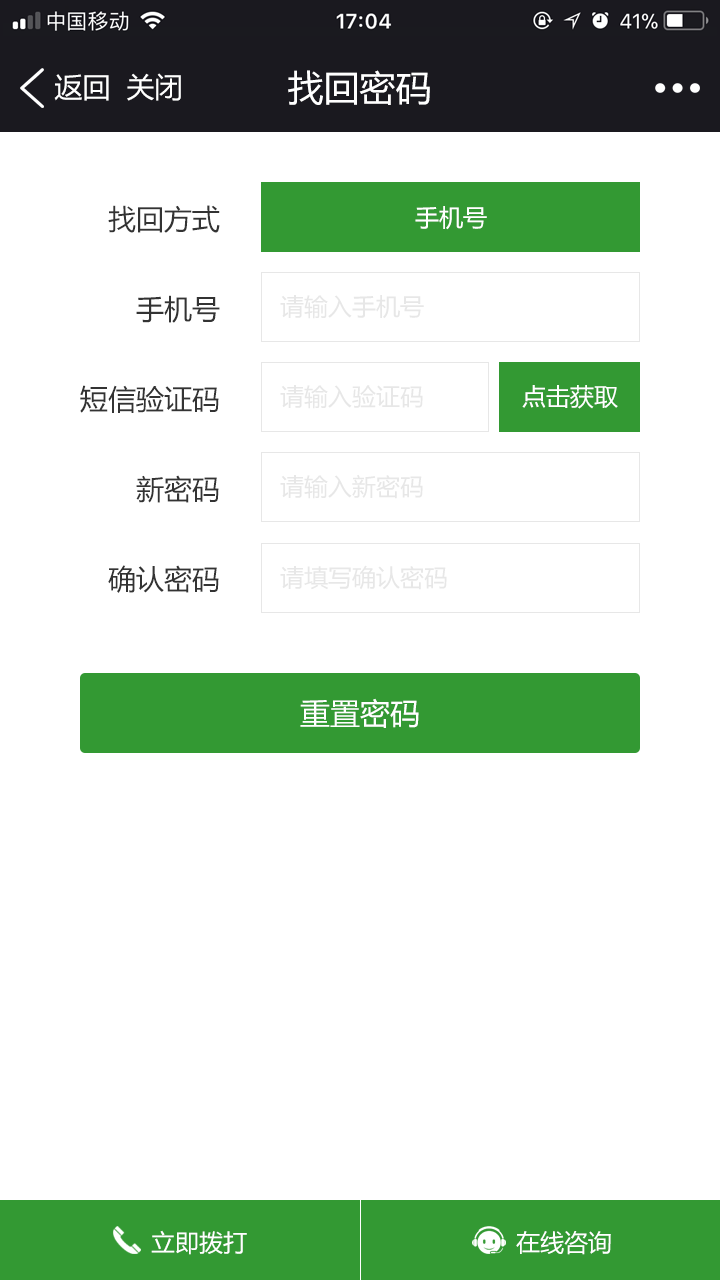
<style>
.page{position:relative;width:720px;height:1280px;background:#ffffff}
.page>*{position:absolute;margin:0}
.t1{font:28px "MicrosoftYaHei";color:#ffffff}
.t2{font:36px "MicrosoftYaHei";color:#ffffff}
.t3{font:28px/90px "MicrosoftYaHei";color:#333333}
.t4{font:24px "MicrosoftYaHei";color:#ffffff}
.t5{font:24px "MicrosoftYaHei";color:#e7e7e7}
.t6{font:30px "MicrosoftYaHei";color:#ffffff}
</style>
<div class="page">
<p class="t1" style="left:54px;top:74px;width:55px;height:27px">返回</p>
<p class="t1" style="left:127px;top:73px;width:54px;height:28px">关闭</p>
<p class="t2" style="left:288px;top:70px;width:142px;height:35px">找回密码</p>
<p class="t3" style="left:80px;top:205px;width:140px;height:388px;text-align:right">找回方式<br>手机号<br>短信验证码<br>新密码<br>确认密码</p>
<p class="t4" style="left:415px;top:206px;width:72px;height:24px">手机号</p>
<p class="t5" style="left:280px;top:295px;width:144px;height:24px">请输入手机号</p>
<p class="t5" style="left:280px;top:385px;width:143px;height:24px">请输入验证码</p>
<p class="t4" style="left:522px;top:385px;width:96px;height:24px">点击获取</p>
<p class="t5" style="left:280px;top:474px;width:143px;height:25px">请输入新密码</p>
<p class="t5" style="left:280px;top:565px;width:167px;height:25px">请填写确认密码</p>
<p class="t6" style="left:300px;top:698px;width:119px;height:30px">重置密码</p>
<p class="t4" style="left:151px;top:1230px;width:96px;height:25px">立即拨打</p>
<p class="t4" style="left:516px;top:1231px;width:95px;height:24px">在线咨询</p>
</div>
